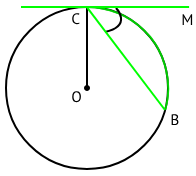
<style>
.page{position:relative;width:196px;height:176px;background:#ffffff}
.page>*{position:absolute;margin:0}
.t1{font:15.2px "PTSans-Regular";color:#000000}
</style>
<div class="page">
<p class="t1" style="left:72px;top:13px;width:8px;height:12px">C</p>
<p class="t1" style="left:182px;top:14px;width:11px;height:11px">M</p>
<p class="t1" style="left:72px;top:91px;width:9px;height:12px">O</p>
<p class="t1" style="left:171px;top:114px;width:8px;height:12px">B</p>
</div>
